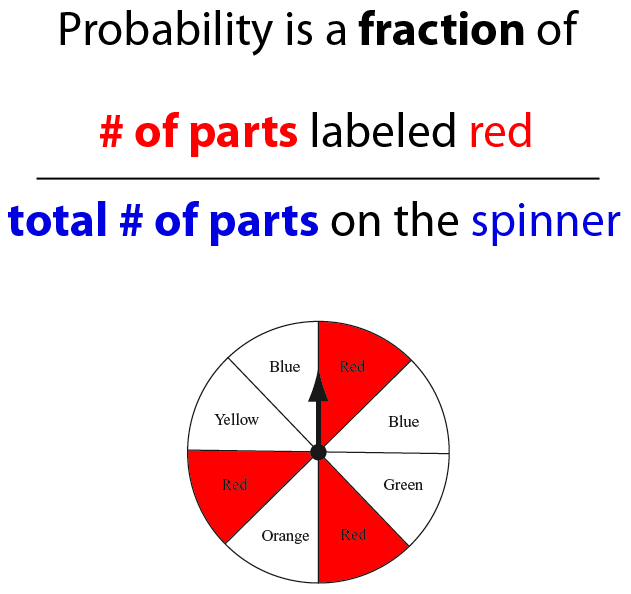
<style>
.page{position:relative;width:631px;height:594px;background:#ffffff}
.page>*{position:absolute;margin:0}
.t1{font:48px "MyriadPro-Regular";color:#000000}
.t2{font:48px "MyriadPro-Bold";color:#000000}
.t3{font:48px "MyriadPro-Bold";color:#ff0000}
.t4{font:48px "MyriadPro-Regular";color:#ff0000}
.t5{font:48px "MyriadPro-Bold";color:#0101df}
.t6{font:48px "MyriadPro-Regular";color:#010101}
.t7{font:48px "MyriadPro-Regular";color:#0101df}
</style>
<div class="page">
<p class="t1" style="left:60px;top:10px;width:519px;height:46px">Probability is a <span class="t2">fraction</span> of</p>
<p class="t3" style="left:100px;top:112px;width:431px;height:45px"># of parts <span class="t1">labeled </span><span class="t4">red</span></p>
<p class="t5" style="left:8px;top:201px;width:613px;height:45px">total # of parts <span class="t6">on the</span><span class="t7"> spinner</span></p>
</div>
